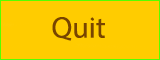
<style>
.page{position:relative;width:160px;height:60px;background:#ffcc00}
.page>*{position:absolute;margin:0}
.t1{font:30px "MyriadHebrew-Regular";color:#784400}
</style>
<div class="page">
<p class="t1" style="left:52px;top:17px;width:53px;height:24px">Quit</p>
</div>
